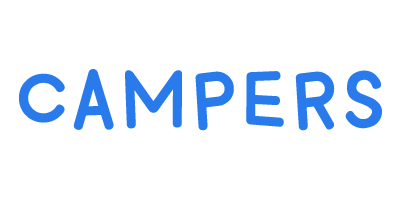
<style>
.page{position:relative;width:400px;height:200px;background:#ffffff}
.page>*{position:absolute;margin:0}
.t1{font:90px "THELetsM";letter-spacing:0.05em;color:#297bec;font-weight:bold}
</style>
<div class="page">
<p class="t1" style="left:19px;top:69px;width:363px;height:62px">CAMPERS</p>
</div>
